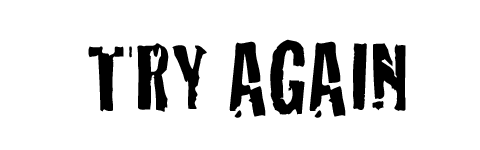
<style>
.page{position:relative;width:480px;height:150px;background:#ffffff}
.page>*{position:absolute;margin:0}
.t1{font:100px "Cracked";color:#000000}
</style>
<div class="page">
<p class="t1" style="left:88px;top:39px;width:318px;height:79px">TRY AGAIN</p>
</div>
